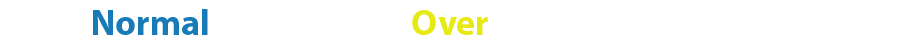
<style>
.page{position:relative;width:900px;height:45px;background:#ffffff}
.page>*{position:absolute;margin:0}
.t1{font:36px "MyriadPro-Bold";color:#187bb7}
.t2{font:36px "MyriadPro-Bold";color:#e7ea12}
</style>
<div class="page">
<p class="t1" style="left:93px;top:9px;width:115px;height:26px">Normal</p>
<p class="t2" style="left:412px;top:10px;width:76px;height:25px">Over</p>
</div>
